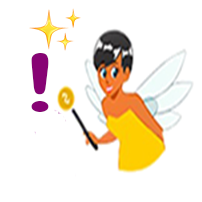
<style>
.page{position:relative;width:202px;height:202px;background:#ffffff}
.page>*{position:absolute;margin:0}
.t1{font:79.1px "ArialRoundedMTBold";color:#870374;scale:1.44 1}
</style>
<div class="page">
<p class="t1" style="left:31px;top:53px;width:18px;height:59px">!</p>
</div>
